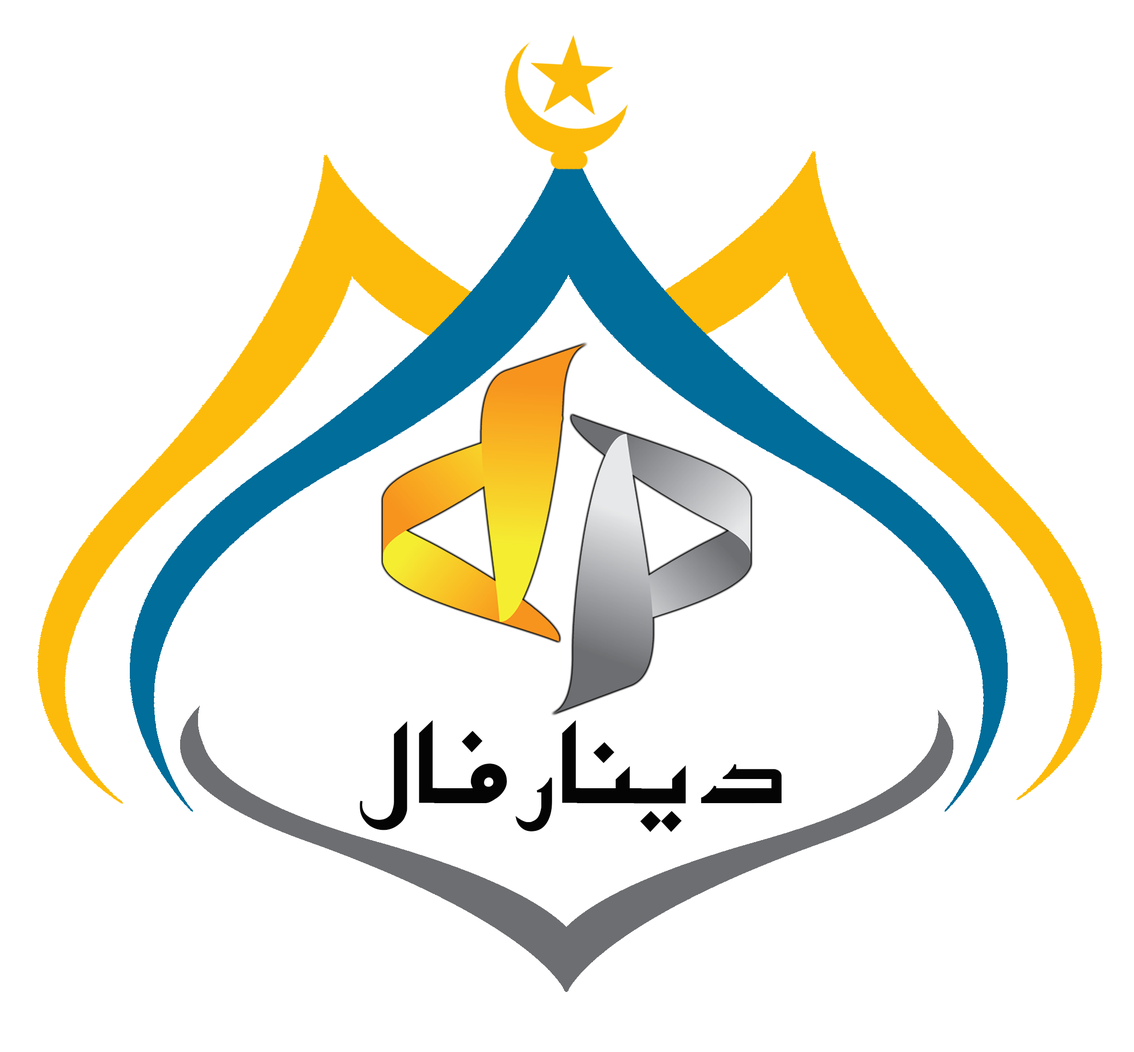
<style>
.page{position:relative;width:1134px;height:1052px;background:#ffffff}
.page>*{position:absolute;margin:0}
.t1{font:141.3px "MCS-Taif-S_U-normal.";color:#040404}
</style>
<div class="page">
<p class="t1" style="left:360px;top:720px;width:422px;height:112px">دينارفال</p>
</div>
